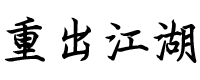
<style>
.page{position:relative;width:200px;height:80px;background:#ffffff}
.page>*{position:absolute;margin:0}
.t1{font:50px "HanWangWCL07";color:#000000}
</style>
<div class="page">
<p class="t1" style="left:4px;top:16px;width:193px;height:47px">重出江湖</p>
</div>
